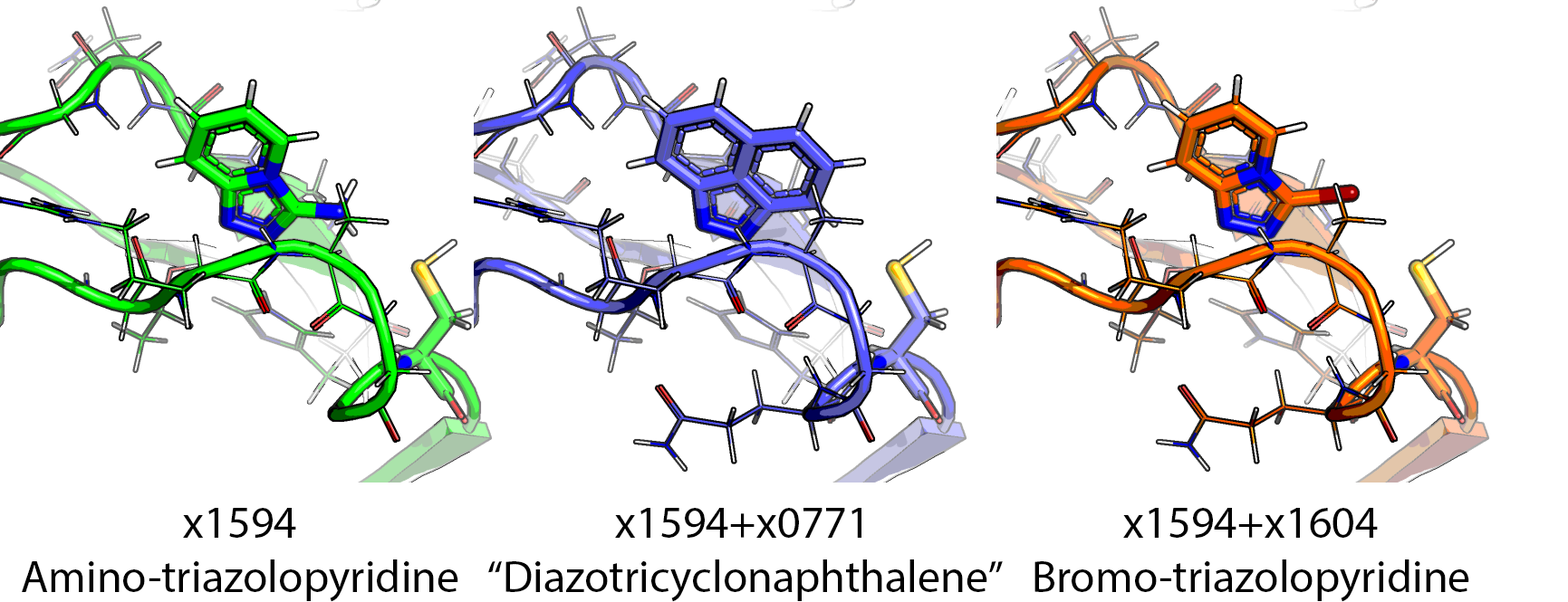
<style>
.page{position:relative;width:1568px;height:602px;background:#ffffff}
.page>*{position:absolute;margin:0}
.t1{font:45.3px "MyriadPro-Regular";color:#000000}
</style>
<div class="page">
<p class="t1" style="left:22px;top:508px;width:436px;height:94px;text-align:center">x1594<br>Amino-triazolopyridine</p>
<p class="t1" style="left:488px;top:508px;width:515px;height:94px;text-align:center">x1594+x0771<br>“Diazotricyclonaphthalene”</p>
<p class="t1" style="left:1034px;top:508px;width:435px;height:94px;text-align:center">x1594+x1604<br>Bromo-triazolopyridine</p>
</div>
